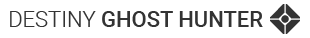
<style>
.page{position:relative;width:310px;height:38px;background:#ffffff}
.page>*{position:absolute;margin:0}
.t1{font:30px "destiny";color:#333333}
.t2{font:22px "Roboto-Medium";color:#333333}
.t3{font:22px "Roboto-Light";color:#333333}
</style>
<div class="page">
<p class="t1" style="left:270px;top:4px;width:30px;height:30px">d</p>
<p class="t2" style="left:10px;top:11px;width:253px;height:16px"><span class="t3">DESTINY </span>GHOST HUNTER</p>
</div>
